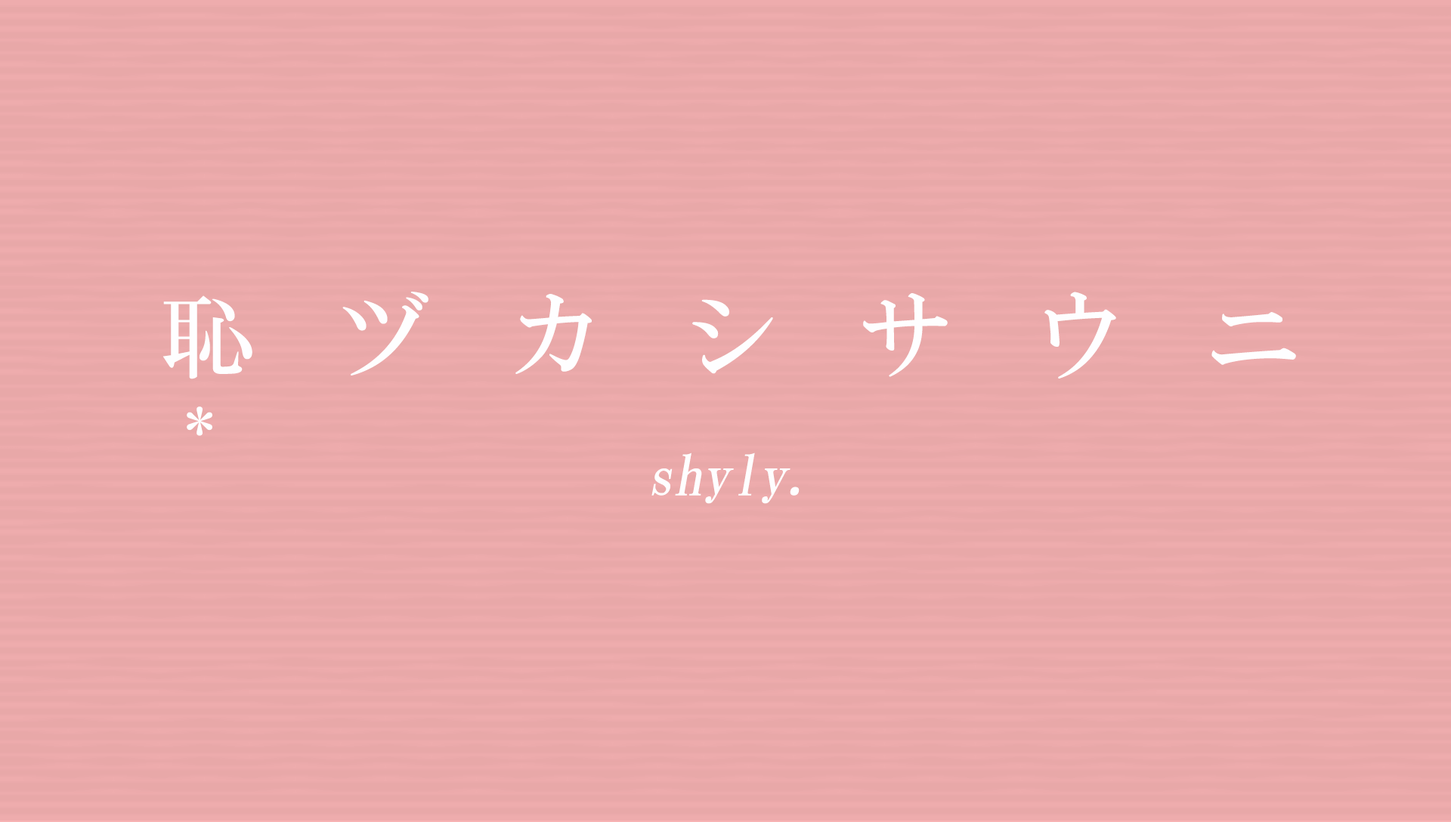
<style>
.page{position:relative;width:1451px;height:822px;background:#e8a8a8}
.page>*{position:absolute;margin:0}
.t1{font:95.2px "HGMinchoB";letter-spacing:0.83em;color:#fefeff}
.t2{font:56.7px "HGMinchoB";letter-spacing:0.83em;color:#fefeff}
.t3{font:55.4px "HGMinchoB";letter-spacing:0.01em;color:#fefeff;font-style:italic}
</style>
<div class="page">
<p class="t1" style="left:162px;top:292px;width:1134px;height:87px">恥ヅカシサウニ</p>
<p class="t2" style="left:187px;top:406px;width:25px;height:30px">*</p>
<p class="t3" style="left:651px;top:453px;width:148px;height:51px">shyly.</p>
</div>
